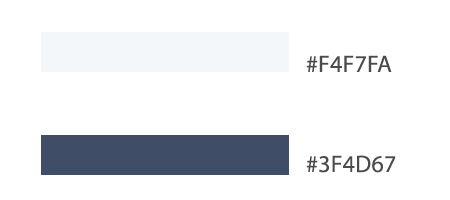
<style>
.page{position:relative;width:450px;height:200px;background:#ffffff}
.page>*{position:absolute;margin:0}
.t1{font:24px "MyriadPro-Regular";letter-spacing:0.01em;color:#4b4b4b}
</style>
<div class="page">
<p class="t1" style="left:306px;top:55px;width:86px;height:17px">#F4F7FA</p>
<p class="t1" style="left:306px;top:155px;width:90px;height:18px">#3F4D67</p>
</div>
